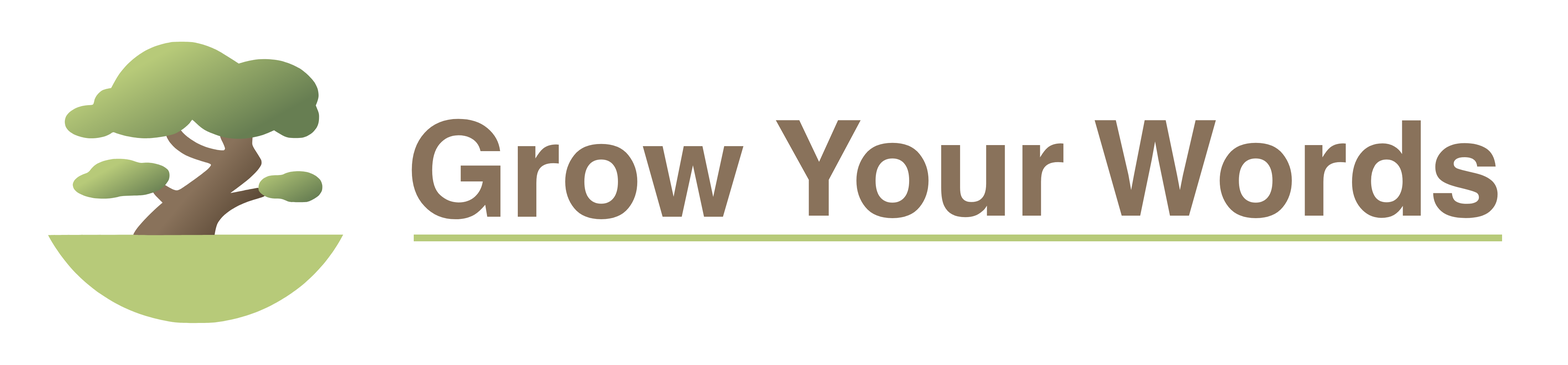
<style>
.page{position:relative;width:1568px;height:365px;background:#ffffff}
.page>*{position:absolute;margin:0}
.t1{font:132.5px "Helvetica-Bold";color:#89725b}
</style>
<div class="page">
<p class="t1" style="left:412px;top:119px;width:332px;height:101px">Grow</p>
<p class="t1" style="left:776px;top:120px;width:288px;height:98px">Your</p>
<p class="t1" style="left:1094px;top:120px;width:404px;height:98px">Words</p>
</div>
